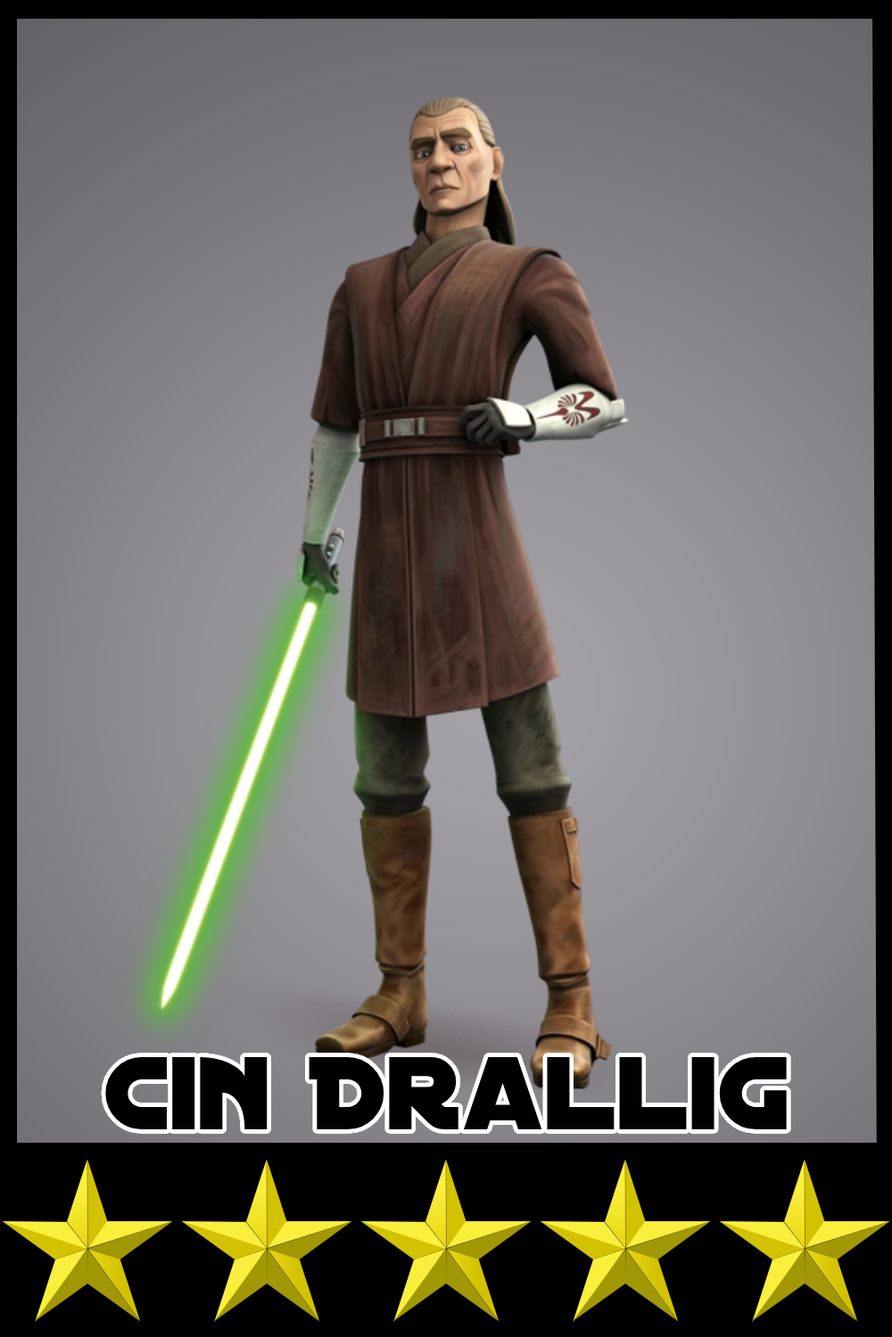
<style>
.page{position:relative;width:892px;height:1337px}
.page>*{position:absolute;margin:0}
.t1{font:111.2px "DistantGalaxy";color:#000000}
</style>
<div class="page">
<p class="t1" style="left:105px;top:1057px;width:681px;height:73px">Cin Drallig</p>
</div>
